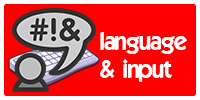
<style>
.page{position:relative;width:200px;height:100px;background:#ff0000}
.page>*{position:absolute;margin:0}
.t1{font:24px "ELEGANCE";color:#ffffff}
</style>
<div class="page">
<p class="t1" style="left:100px;top:32px;width:87px;height:50px">language<br>&amp; input</p>
</div>
